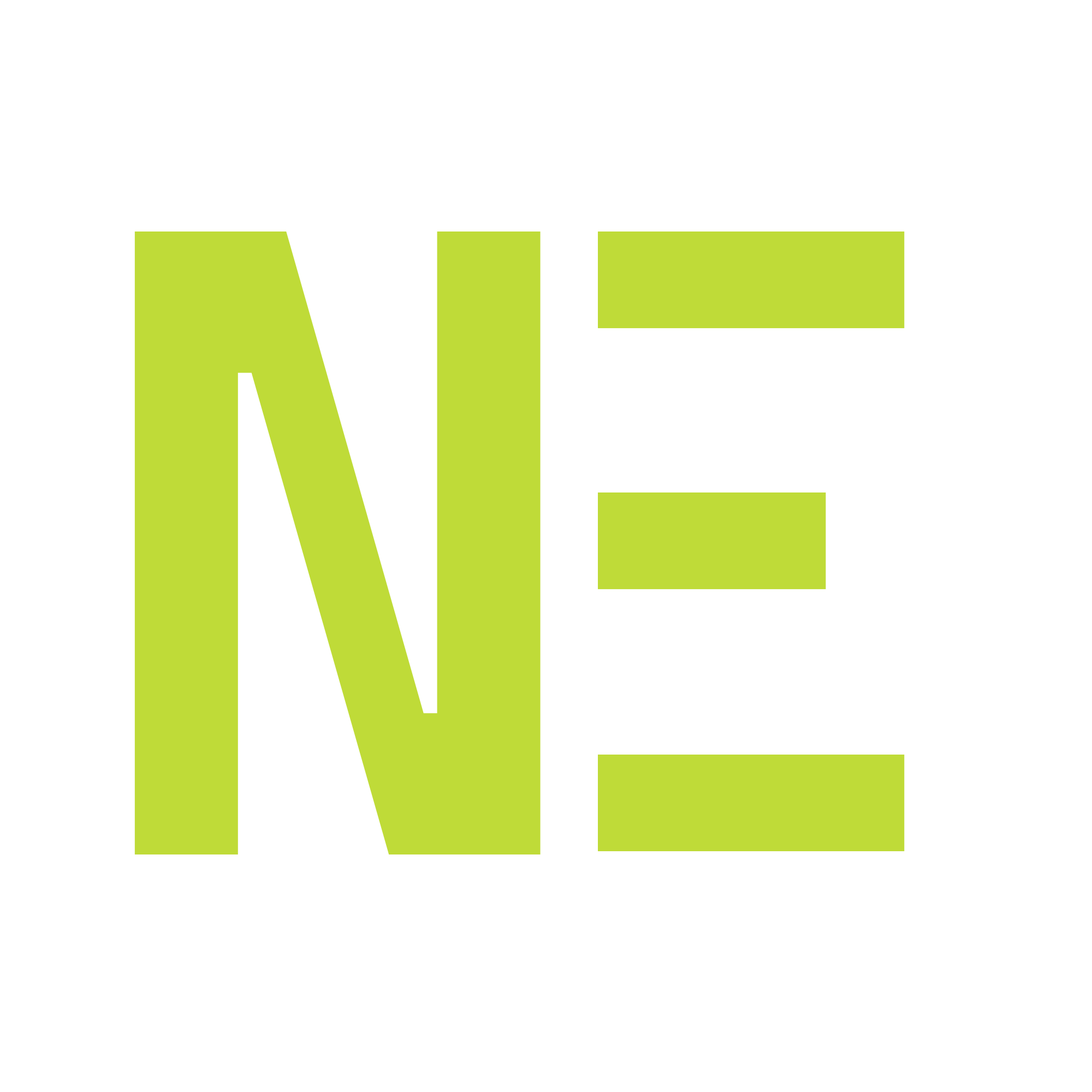
<style>
.page{position:relative;width:1092px;height:1092px;background:#ffffff}
.page>*{position:absolute;margin:0}
.t1{font:898.5px "CascadiaCodeRoman-SemiBold";letter-spacing:-0.01em;color:#bfdb38}
.t2{font:893.6px "CascadiaCodeRoman-SemiBold";letter-spacing:-0.01em;color:#bfdb38}
</style>
<div class="page">
<p class="t1" style="left:134px;top:232px;width:407px;height:622px">N</p>
<p class="t2" style="left:485px;top:232px;width:420px;height:619px">E</p>
</div>
